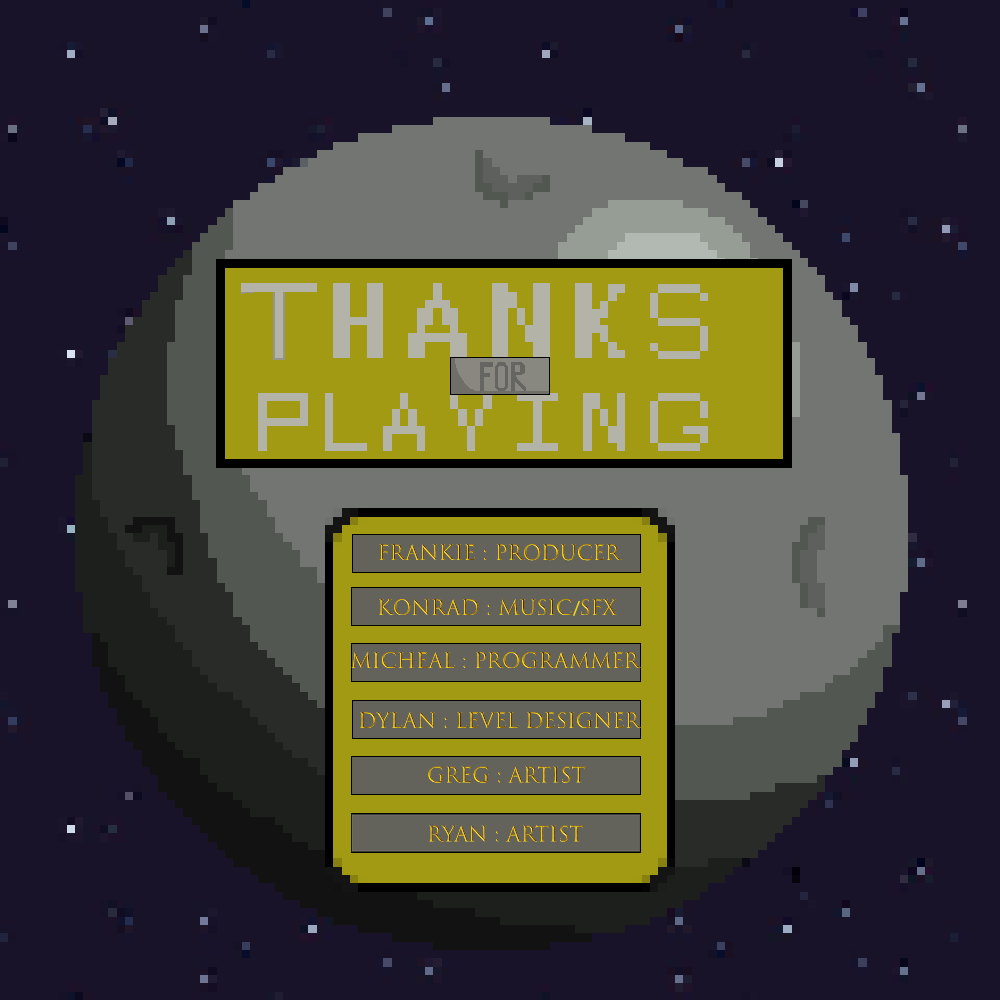
<style>
.page{position:relative;width:1000px;height:1000px;background:#181329}
.page>*{position:absolute;margin:0}
.t1{font:20.3px "TrajanColor-Concept"}
.t2{font:20.3px "MyriadPro-Regular"}
</style>
<div class="page">
<p class="t1" style="left:379px;top:544px;width:244px;height:17px">FRANKIE : PRODUCER</p>
<p class="t1" style="left:379px;top:599px;width:238px;height:17px">KONRAD : MUSIC<span class="t2">/</span>SFX</p>
<p class="t1" style="left:351px;top:652px;width:291px;height:16px">MICHEAL : PROGRAMMER</p>
<p class="t1" style="left:360px;top:712px;width:282px;height:17px">DYLAN : LEVEL DESIGNER</p>
<p class="t1" style="left:428px;top:766px;width:158px;height:17px">gREG : ARTIST</p>
<p class="t1" style="left:429px;top:825px;width:155px;height:17px">RYAN : ARTIST<br>RY</p>
</div>
